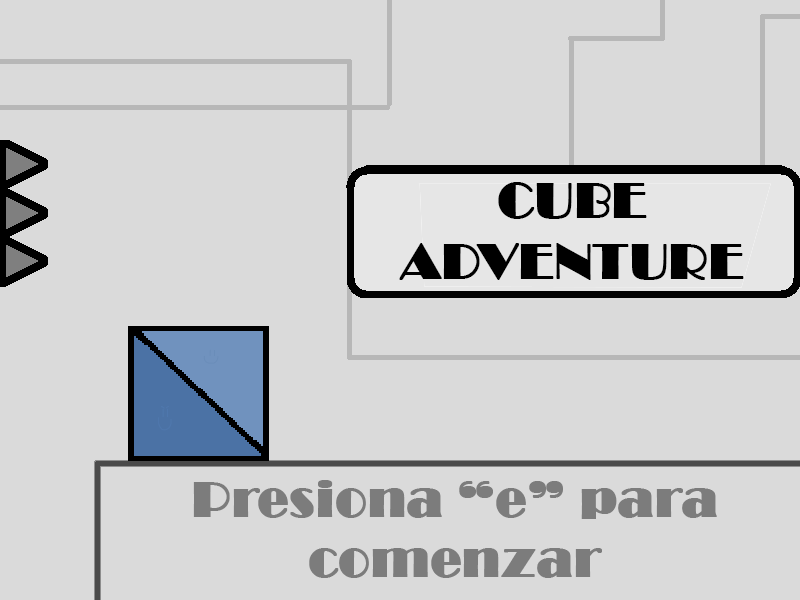
<style>
.page{position:relative;width:800px;height:600px;background:#dadada}
.page>*{position:absolute;margin:0}
.t1{font:50.7px "Broadway";color:#000000;font-weight:bold}
.t2{font:50.7px "Broadway";color:#7c7c7c;font-weight:bold}
</style>
<div class="page">
<p class="t1" style="left:399px;top:182px;width:345px;height:98px;text-align:center">CUBE ADVENTURE</p>
<p class="t2" style="left:193px;top:480px;width:524px;height:98px;text-align:center">Presiona “e” para comenzar</p>
</div>
